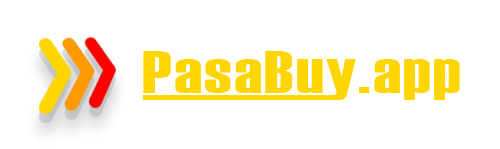
<style>
.page{position:relative;width:500px;height:149px;background:#ffffff}
.page>*{position:absolute;margin:0}
.t1{font:60.1px "Haettenschweiler";letter-spacing:0.03em;color:#fed500;scale:1.29 1}
</style>
<div class="page">
<p class="t1" style="left:143px;top:51px;width:317px;height:49px">PasaBuy.app</p>
</div>
